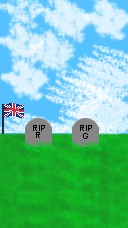
<style>
.page{position:relative;width:128px;height:228px}
.page>*{position:absolute;margin:0}
.t1{font:8px "Arial-BoldMT";color:#000000}
</style>
<div class="page">
<p class="t1" style="left:33px;top:125px;width:12px;height:6px">RIP</p>
<p class="t1" style="left:36px;top:132px;width:4px;height:6px">R</p>
<p class="t1" style="left:83px;top:133px;width:5px;height:6px">G</p>
</div>
